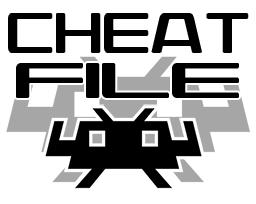
<style>
.page{position:relative;width:256px;height:204px;background:#ffffff}
.page>*{position:absolute;margin:0}
.t1{font:57.4px/28.8px "Seele-Two";letter-spacing:0.1em;color:#000000;scale:0.51 1}
.t2{font:50.3px/28.8px "Seele-Two";color:#000000;scale:0.91 1}
</style>
<div class="page">
<p class="t1" style="left:9px;top:14px;width:239px;height:83px;text-align:center">CHEAT<br><span class="t2">FILE</span></p>
<p class="t1" style="left:9px;top:14px;width:239px;height:83px;text-align:center">CHEAT<br><span class="t2">FILE</span></p>
</div>
